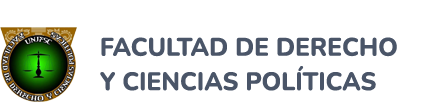
<style>
.page{position:relative;width:432px;height:102px;background:#ffffff}
.page>*{position:absolute;margin:0}
.t1{font:25.3px/34.4px "Nunito-ExtraBold";color:#4a5568}
</style>
<div class="page">
<p class="t1" style="left:100px;top:37px;width:297px;height:54px">FACULTAD DE DERECHO<br>Y CIENCIAS POLÍTICAS</p>
</div>
